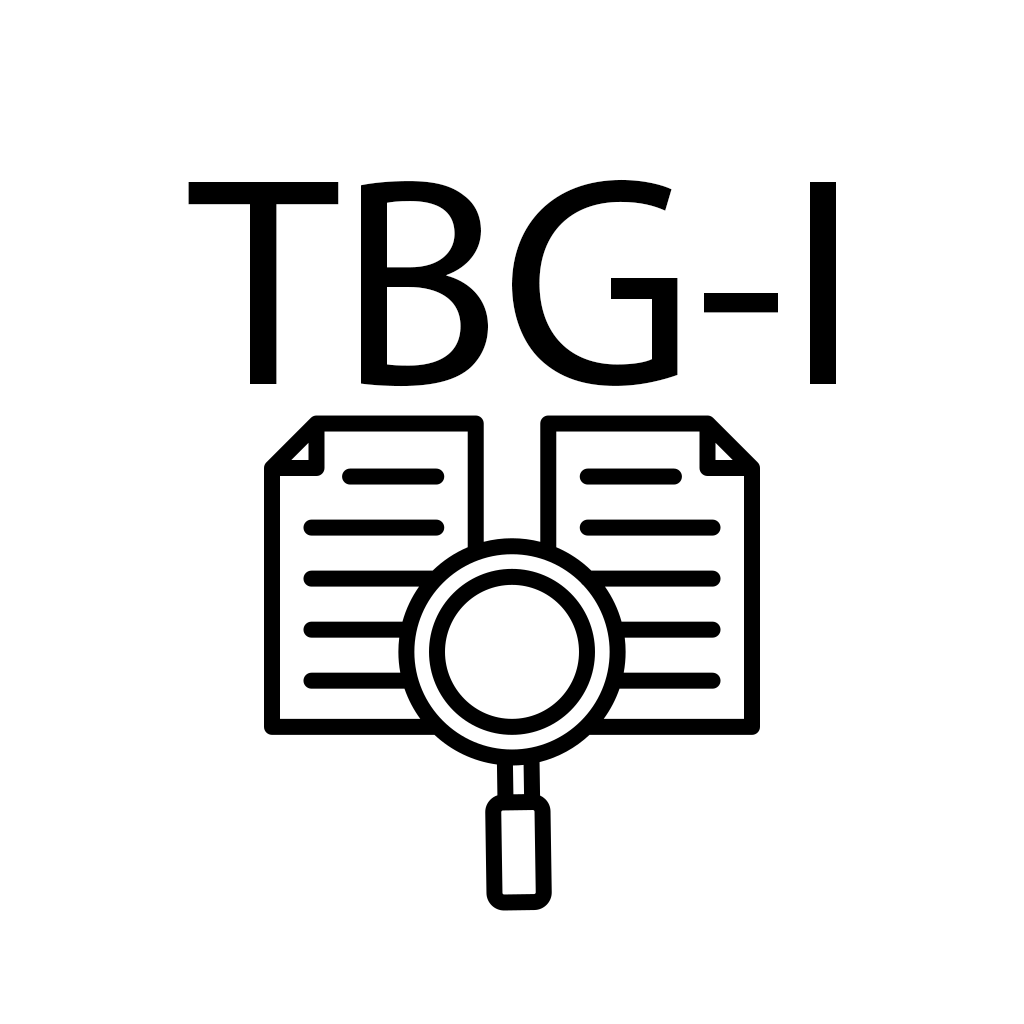
<style>
.page{position:relative;width:1024px;height:1024px;background:#ffffff}
.page>*{position:absolute;margin:0}
.t1{font:300px "MyriadPro-Regular";color:#000000}
</style>
<div class="page">
<p class="t1" style="left:188px;top:179px;width:648px;height:208px">TBG-I</p>
</div>
